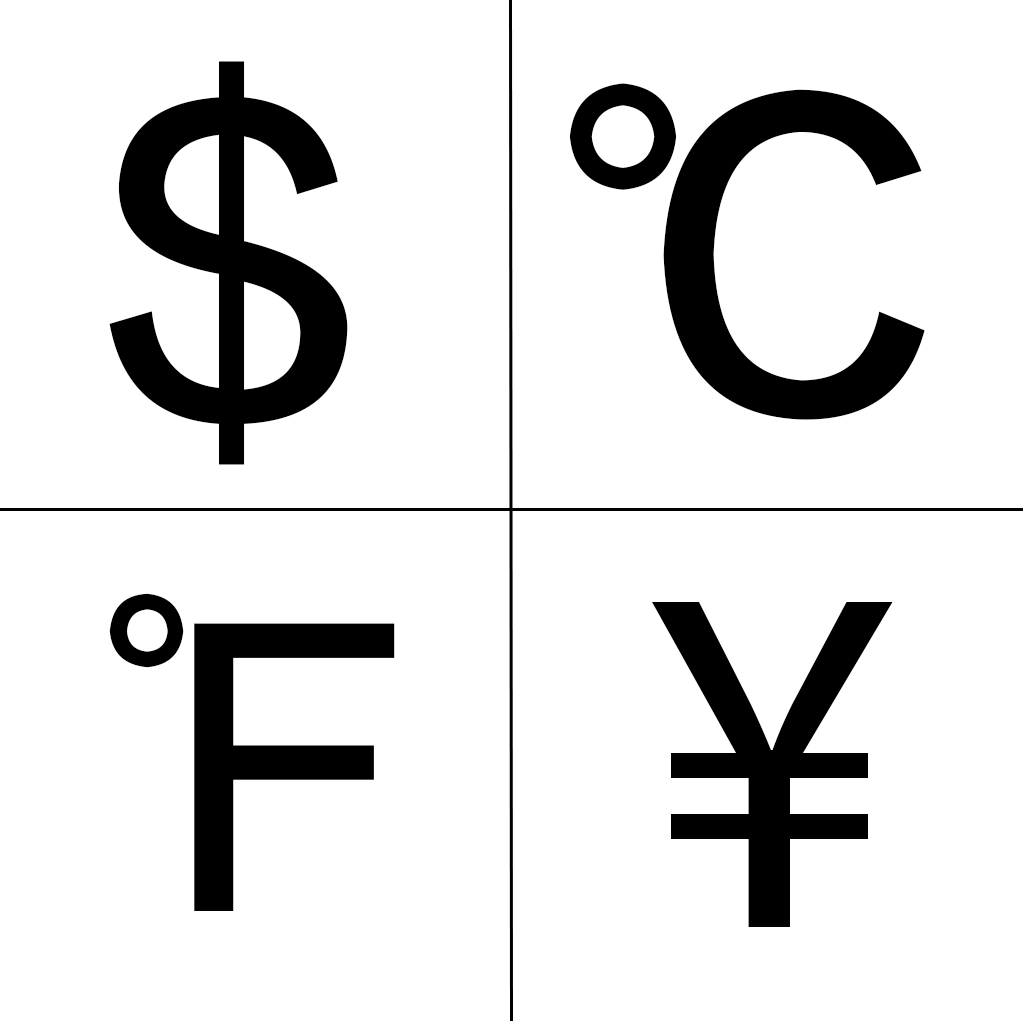
<style>
.page{position:relative;width:1024px;height:1024px;background:#ffffff}
.page>*{position:absolute;margin:0}
.t1{font:400px "FZLTZHK--GBK1-0";color:#000000}
.t2{font:500px "MyriadPro-Regular";color:#000000}
</style>
<div class="page">
<p class="t1" style="left:109px;top:61px;width:239px;height:404px">$</p>
<p class="t1" style="left:569px;top:83px;width:356px;height:337px">℃</p>
<p class="t1" style="left:109px;top:593px;width:286px;height:318px">℉</p>
<p class="t2" style="left:652px;top:602px;width:241px;height:325px">¥</p>
</div>
